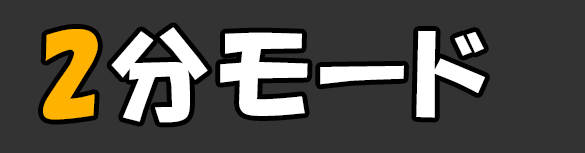
<style>
.page{position:relative;width:585px;height:153px;background:#333333}
.page>*{position:absolute;margin:0}
.t1{font:100px "HGPSoeiKakupoptai";letter-spacing:0.075em;color:#ffffff}
.t2{font:100px "HGPSoeiKakupoptai";letter-spacing:0.075em;color:#ffb300}
</style>
<div class="page">
<p class="t1" style="left:43px;top:27px;width:442px;height:96px"><span class="t2">2</span>分モード</p>
</div>
